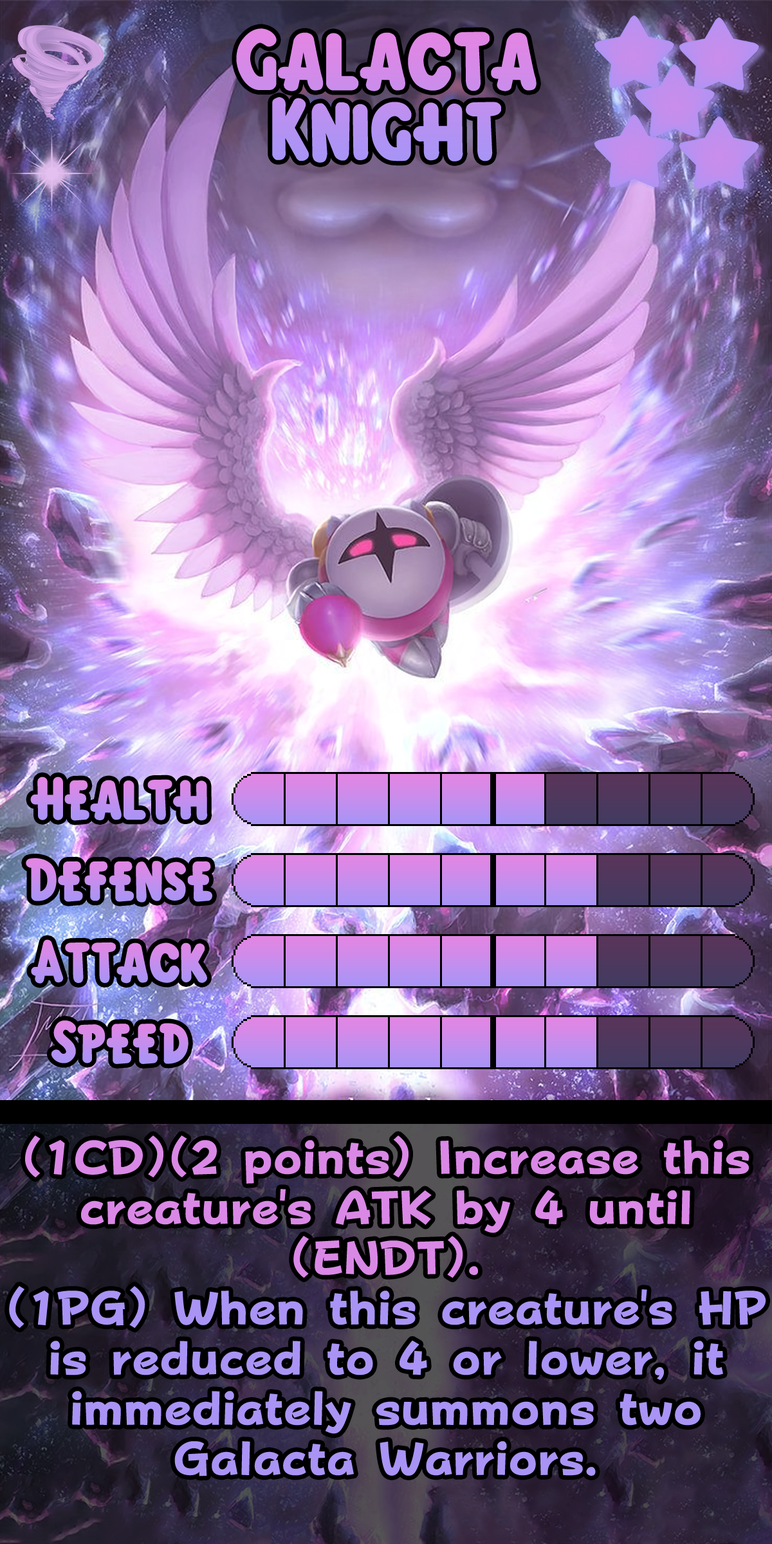
<style>
.page{position:relative;width:772px;height:1544px}
.page>*{position:absolute;margin:0}
.t1{font:135.1px/70.1px "KirbyClassic"}
.t2{font:92.7px "KirbyClassic"}
.t3{font:80.4px/50.2px "FOTPopHappinessStrp-ExtraBold";color:#a994f5}
.t4{font:80.4px/50.2px "FOTPopHappinessStrp-ExtraBold";color:#da88e6}
</style>
<div class="page">
<p class="t1" style="left:236px;top:28px;width:301px;height:135px;text-align:center">Galacta<br>Knight</p>
<p class="t2" style="left:30px;top:777px;width:178px;height:44px">Health</p>
<p class="t2" style="left:26px;top:858px;width:186px;height:45px">Defense</p>
<p class="t2" style="left:31px;top:939px;width:176px;height:45px">Attack</p>
<p class="t2" style="left:51px;top:1021px;width:138px;height:43px">Speed</p>
<p class="t3" style="left:9px;top:1136px;width:757px;height:341px;text-align:center"><span class="t4">(1CD)(2 points) Increase this creature's ATK by 4 until (ENDT).<br></span>(1PG) When this creature's HP is reduced to 4 or lower, it immediately summons two Galacta Warriors.</p>
</div>
